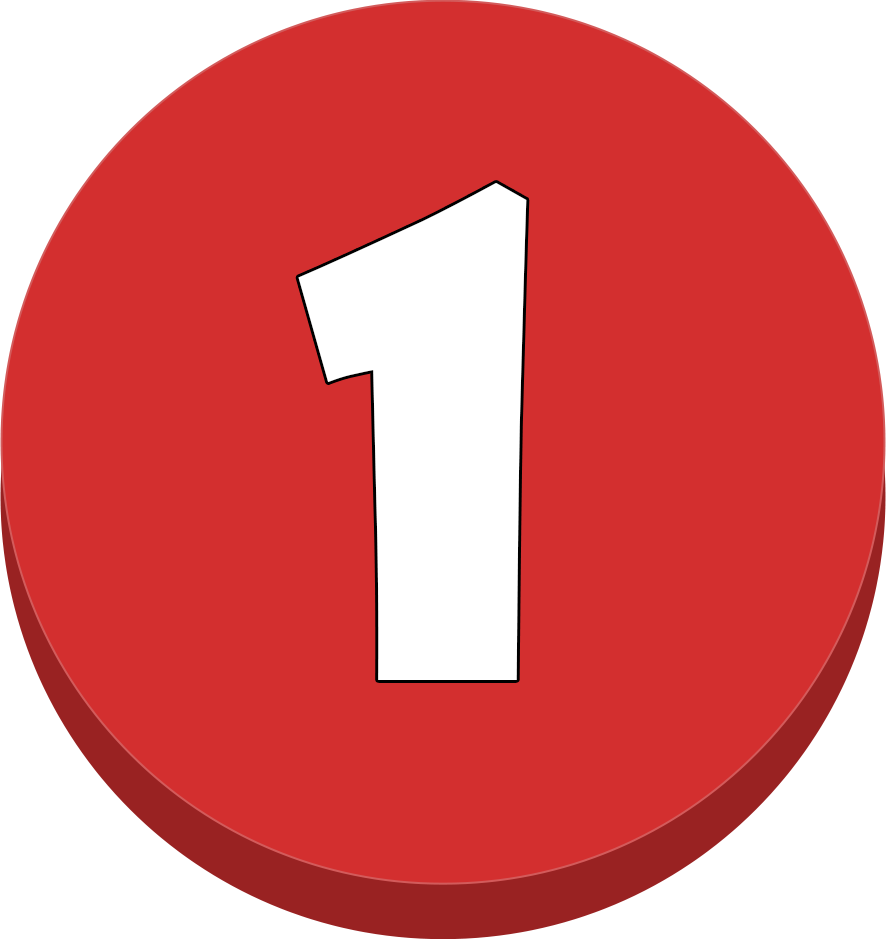
<style>
.page{position:relative;width:886px;height:939px;background:#d32f2f}
.page>*{position:absolute;margin:0}
.t1{font:637.2px "ShowcardGothic-Reg";color:#ffffff}
</style>
<div class="page">
<p class="t1" style="left:298px;top:183px;width:229px;height:497px">1</p>
</div>
